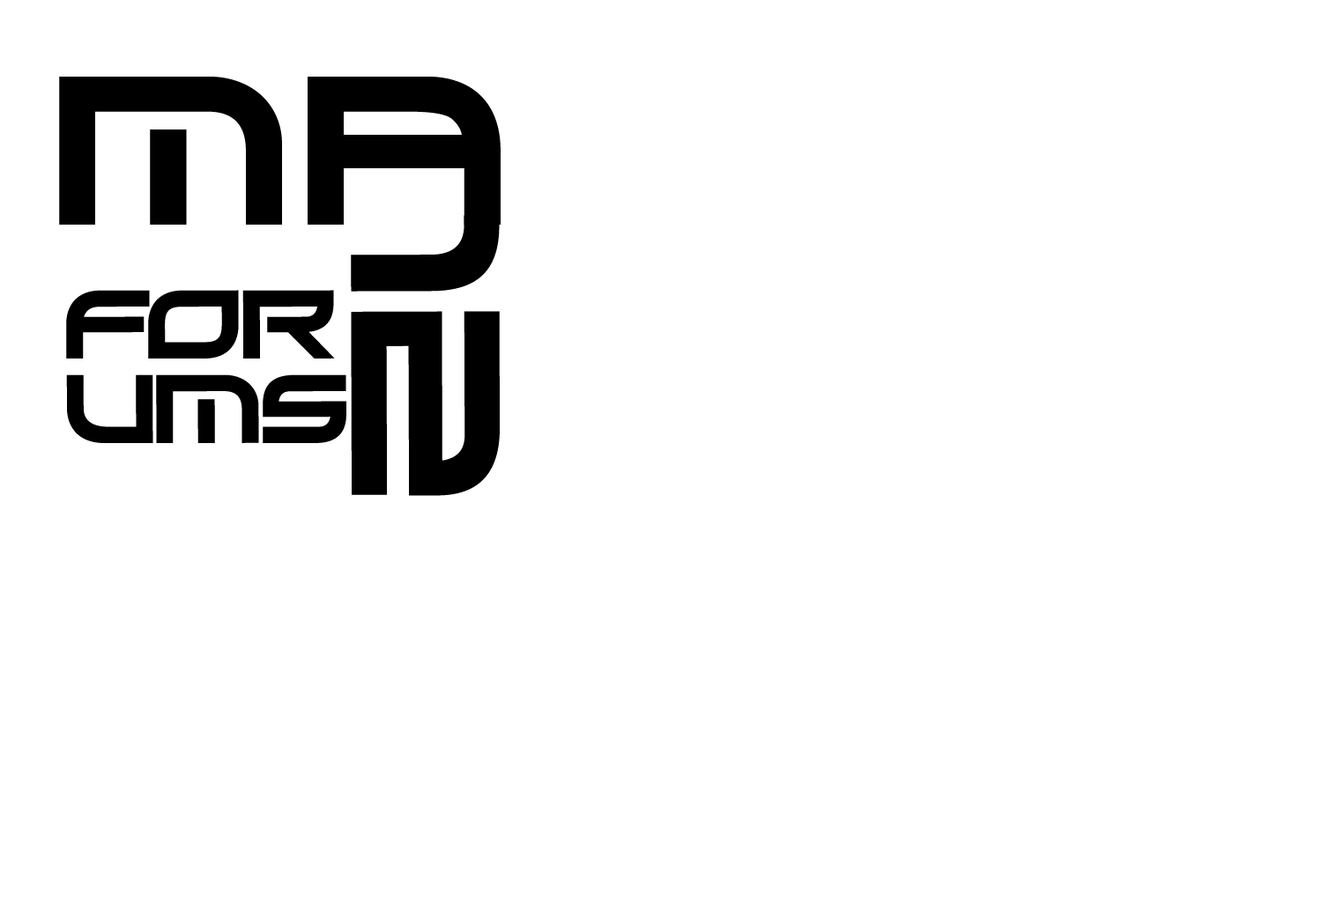
<style>
.page{position:relative;width:1322px;height:902px;background:#ffffff}
.page>*{position:absolute;margin:0}
.t1{font:211.4px "Xirod-Regular";color:#000000}
.t2{font:211.4px "Xirod-Regular";color:#ffffff}
.t3{font:96.9px/84.6px "Xirod-Regular";letter-spacing:-0.075em;color:#000000}
</style>
<div class="page">
<p class="t1" style="left:59px;top:77px;width:739px;height:148px">MA<span class="t2">12</span></p>
<p class="t1" style="left:351px;top:215px;width:149px;height:281px;rotate:90deg">12</p>
<p class="t3" style="left:66px;top:290px;width:280px;height:153px">FoR<br>ums</p>
</div>
